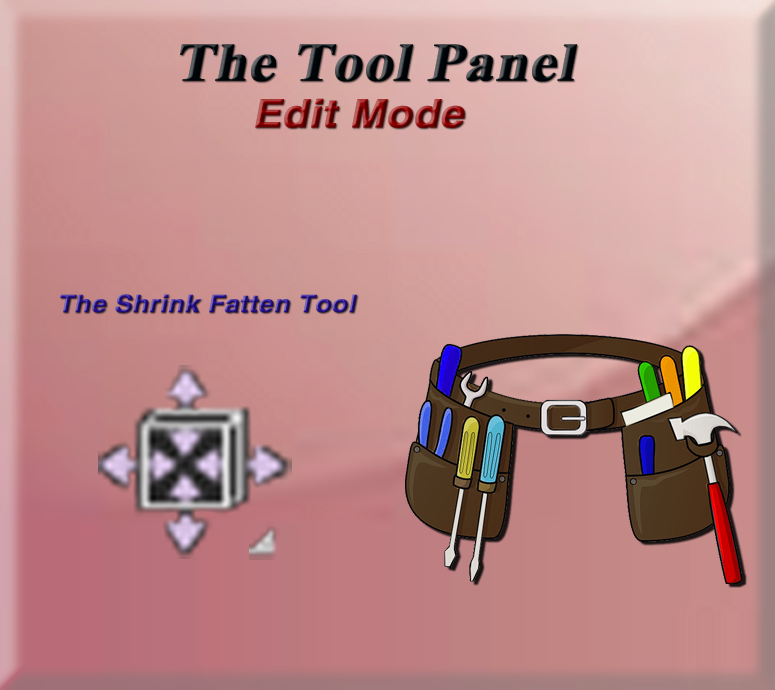
<style>
.page{position:relative;width:775px;height:690px}
.page>*{position:absolute;margin:0}
.t1{font:53.9px "TimesNewRomanPS-BoldMT";color:#000609;font-weight:bold;font-style:italic;scale:1.08 1}
.t2{font:39.1px "HelveticaLTStd-Bold";font-weight:bold;font-style:italic;scale:1.08 1}
.t3{font:53.9px "TimesNewRomanPS-BoldMT";font-weight:bold;font-style:italic;scale:1.08 1}
.t4{font:24.2px "HelveticaLTStd-Bold";font-weight:bold;font-style:italic;scale:1.08 1}
</style>
<div class="page">
<p class="t1" style="left:180px;top:44px;width:397px;height:38px">The Tool Panel</p>
<p class="t2" style="left:255px;top:98px;width:210px;height:30px"><span class="t3"> </span>Edit Mode</p>
<p class="t4" style="left:60px;top:294px;width:297px;height:19px">The Shrink Fatten Tool</p>
</div>
